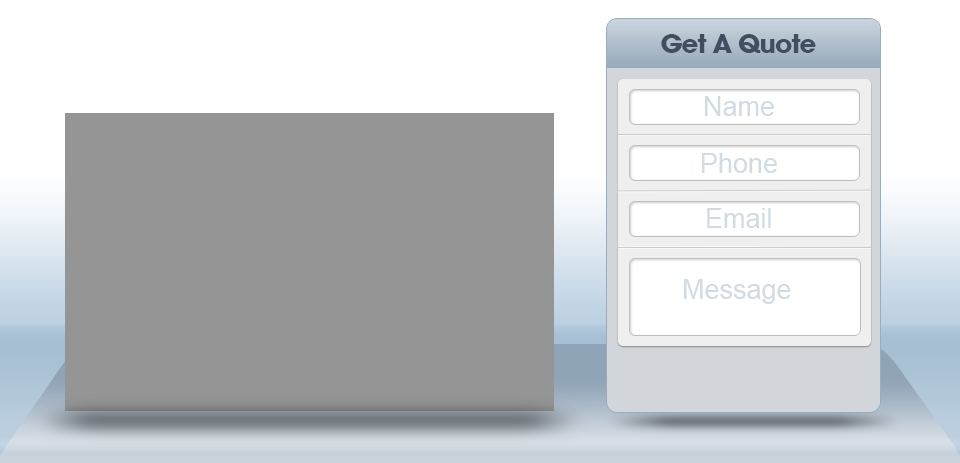
<style>
.page{position:relative;width:960px;height:463px;background:#959596}
.page>*{position:absolute;margin:0}
.t1{font:27px "ArialMT";color:#d2dae2}
</style>
<div class="page">
<p class="t1" style="left:705px;top:96px;width:69px;height:20px">Name</p>
<p class="t1" style="left:702px;top:153px;width:75px;height:20px">Phone</p>
<p class="t1" style="left:707px;top:208px;width:64px;height:20px">Email</p>
<p class="t1" style="left:684px;top:279px;width:107px;height:25px">Message</p>
</div>
